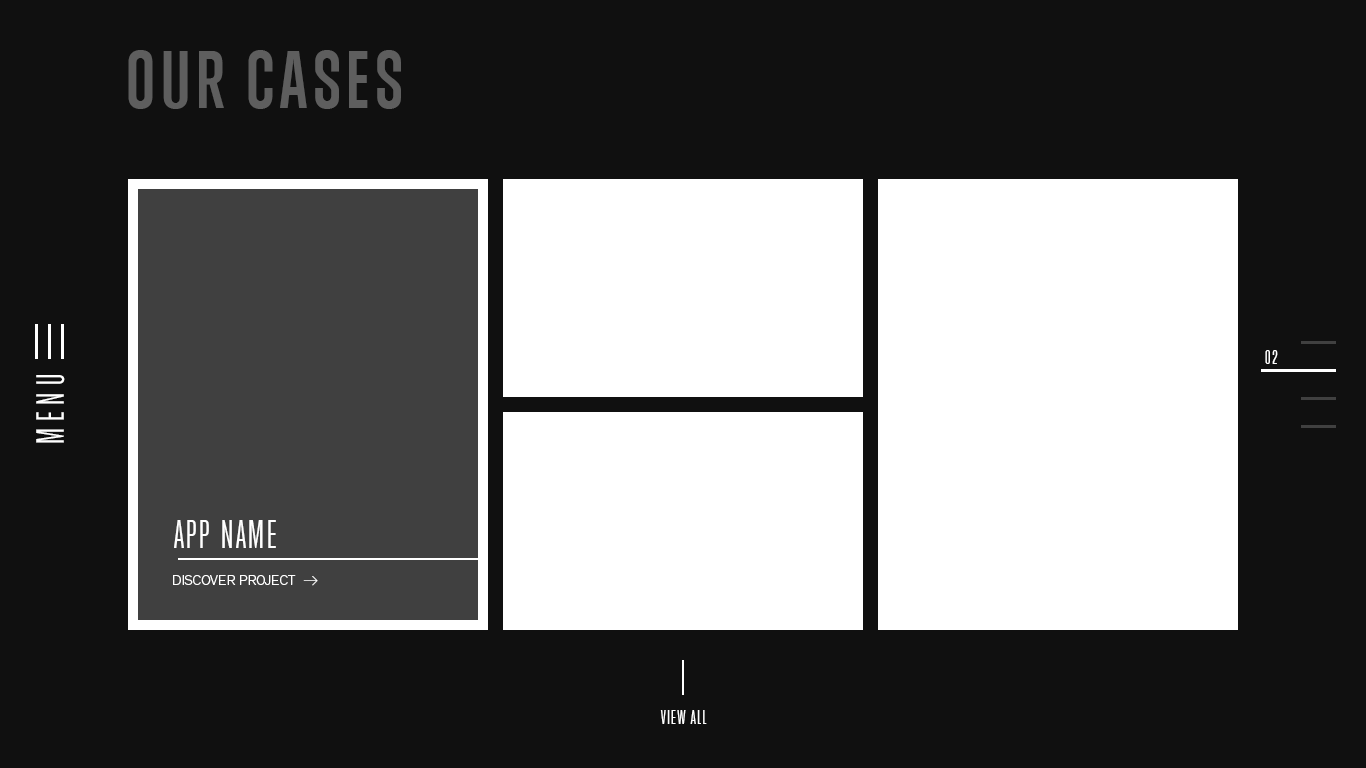
<style>
.page{position:relative;width:1366px;height:768px;background:#101010}
.page>*{position:absolute;margin:0}
.t1{font:75px "TrumpGothicWest-Bold";letter-spacing:0.075em;color:#5e5e5e;text-transform:uppercase}
.t2{font:18px "TrumpGothicWest";letter-spacing:0.1em;color:#ffffff;text-transform:uppercase}
.t3{font:36px "TrumpGothicWest";letter-spacing:0.2em;color:#ffffff;text-transform:uppercase}
.t4{font:36px "TrumpGothicWest";letter-spacing:0.075em;color:#ffffff;text-transform:uppercase}
.t5{font:14px "Theinhardt-Light";color:#ffffff;text-transform:uppercase}
.t6{font:18px "Theinhardt-HairlineItalic";letter-spacing:0.075em;color:#ffffff;text-transform:uppercase;font-weight:bold}
.t7{font:18px "TrumpGothicWest";letter-spacing:0.075em;color:#ffffff;text-transform:uppercase}
</style>
<div class="page">
<p class="t1" style="left:128px;top:50px;width:273px;height:59px">our cases</p>
<p class="t2" style="left:1265px;top:350px;width:13px;height:14px">02</p>
<p class="t3" style="left:36px;top:375px;width:29px;height:68px;rotate:-90deg">menu</p>
<p class="t4" style="left:174px;top:520px;width:102px;height:28px">app name</p>
<p class="t5" style="left:173px;top:575px;width:123px;height:10px">discover project</p>
<p class="t6" style="left:303px;top:576px;width:15px;height:10px">→</p>
<p class="t7" style="left:660px;top:710px;width:47px;height:14px">view all</p>
</div>
